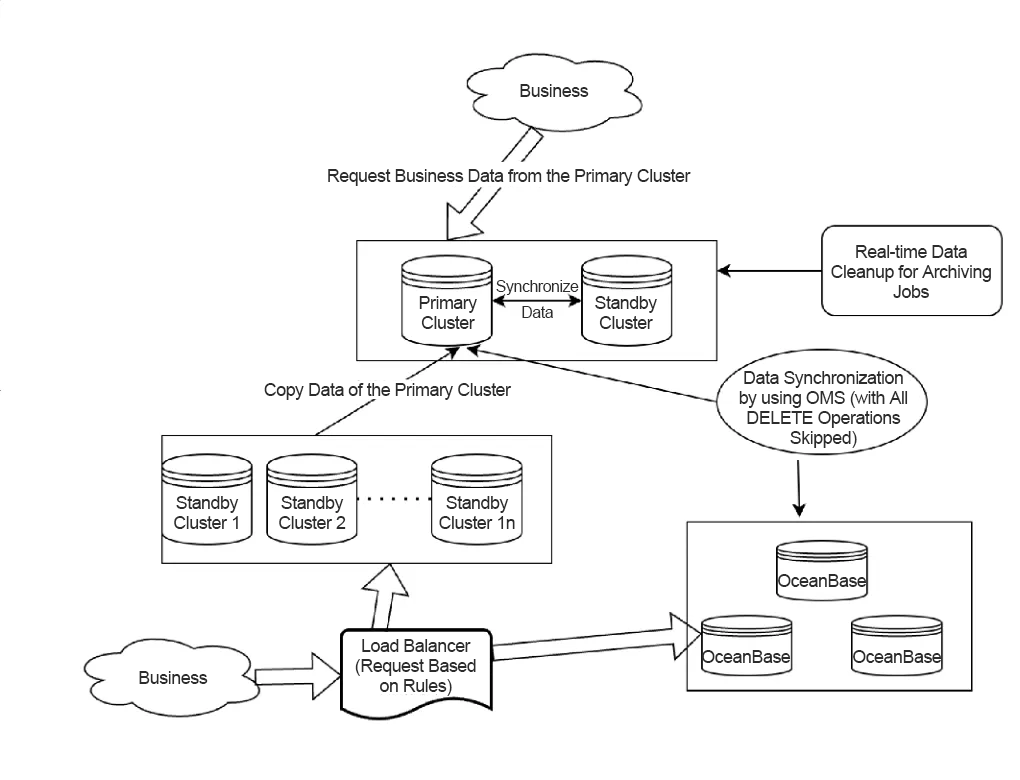
<style>
.page{position:relative;width:1020px;height:780px;background:#ffffff}
.page>*{position:absolute;margin:0}
.t1{font:18px "ArialMT";letter-spacing:-0.03em;color:#2c2c2c}
.t2{font:18px/20px "ArialMT";letter-spacing:-0.03em;color:#2c2c2c}
.t3{font:16px/26px "ArialMT";letter-spacing:-0.03em;color:#2c2c2c}
</style>
<div class="page">
<p class="t1" style="left:520px;top:84px;width:69px;height:13px">Business</p>
<p class="t1" style="left:328px;top:169px;width:363px;height:17px">Request Business Data from the Primary Cluster</p>
<p class="t2" style="left:831px;top:245px;width:160px;height:53px;text-align:center">Real-time Data Cleanup for Archiving Jobs</p>
<p class="t3" style="left:496px;top:280px;width:83px;height:38px;text-align:center">Synchronize Data</p>
<p class="t2" style="left:419px;top:296px;width:58px;height:33px;text-align:center">Primary Cluster</p>
<p class="t2" style="left:595px;top:296px;width:62px;height:33px;text-align:center">Standby Cluster</p>
<p class="t2" style="left:739px;top:371px;width:169px;height:77px;text-align:center">Data Synchronization <br>by using OMS (with All DELETE Operations Skipped)</p>
<p class="t1" style="left:264px;top:383px;width:248px;height:17px">Copy Data of the Primary Cluster</p>
<p class="t2" style="left:174px;top:496px;width:65px;height:33px;text-align:center">Standby Cluster 1</p>
<p class="t2" style="left:279px;top:496px;width:67px;height:33px;text-align:center">Standby Cluster 2</p>
<p class="t2" style="left:439px;top:496px;width:76px;height:33px;text-align:center">Standby Cluster 1n</p>
<p class="t1" style="left:778px;top:574px;width:89px;height:13px">OceanBase</p>
<p class="t2" style="left:355px;top:639px;width:121px;height:57px;text-align:center">Load Balancer (Request Based on Rules)</p>
<p class="t1" style="left:702px;top:650px;width:89px;height:13px">OceanBase</p>
<p class="t1" style="left:853px;top:650px;width:89px;height:13px">OceanBase</p>
<p class="t1" style="left:139px;top:671px;width:69px;height:13px">Business</p>
</div>
